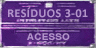
<style>
.page{position:relative;width:96px;height:48px}
.page>*{position:absolute;margin:0}
.t1{font:12px "Calibri-Bold";letter-spacing:0.04em;color:#c1a1d8}
.t2{font:9.2px "Arial-BoldMT";letter-spacing:0.01em;color:#c1a1d8;scale:1.09 1}
</style>
<div class="page">
<p class="t1" style="left:8px;top:7px;width:80px;height:11px;opacity:0.85">RESÍDUOS 3-01</p>
<p class="t2" style="left:27px;top:33px;width:43px;height:7px;opacity:0.85">ACESSO</p>
</div>
